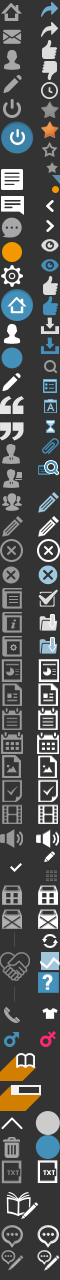
<style>
.page{position:relative;width:60px;height:1280px;background:#333333}
.page>*{position:absolute;margin:0}
.t1{font:20.6px "AvantGarde-Demi";letter-spacing:0.05em;color:#ffffff;font-weight:bold}
.t2{font:7.1px "BerlinSansFBDemi-Bold";letter-spacing:0.025em;color:#7b7b7b}
.t3{font:7.1px "BerlinSansFBDemi-Bold";letter-spacing:0.025em;color:#ffffff}
</style>
<div class="page">
<p class="t1" style="left:42px;top:974px;width:11px;height:16px">?</p>
<p class="t2" style="left:7px;top:1170px;width:12px;height:5px">TXT</p>
<p class="t3" style="left:43px;top:1170px;width:12px;height:5px">TXT</p>
</div>
